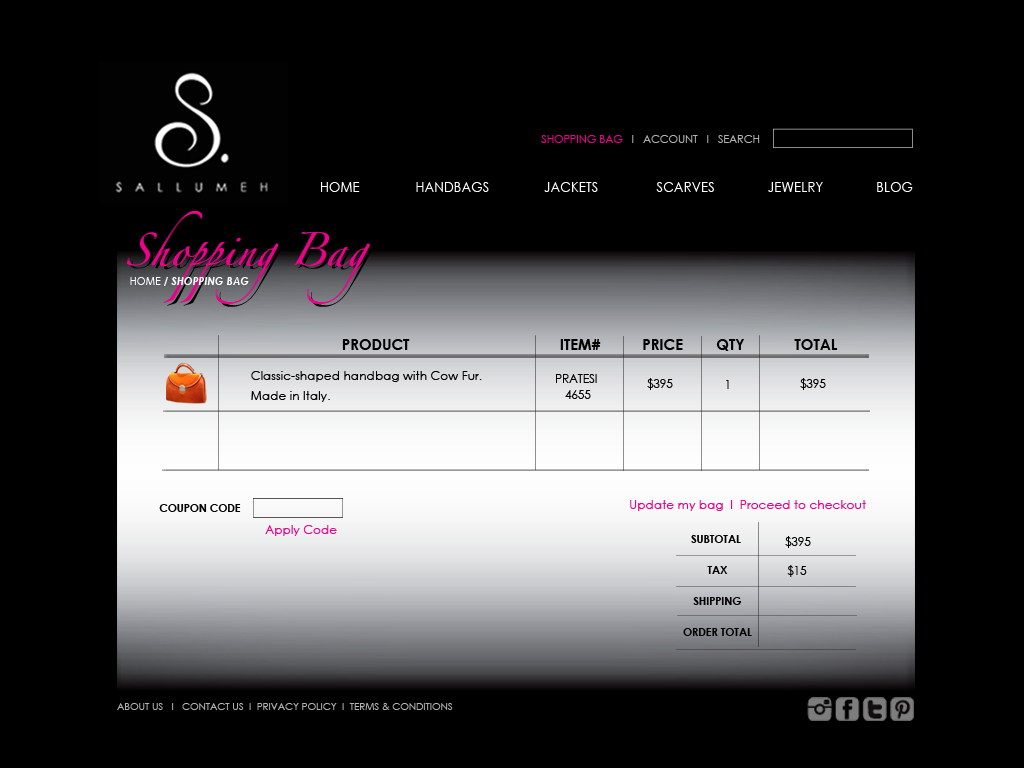
<style>
.page{position:relative;width:1024px;height:768px;background:#000000}
.page>*{position:absolute;margin:0}
.t1{font:10.9px "CenturyGothic";color:#b2b1b1}
.t2{font:10.9px "CenturyGothic";color:#ec008c}
.t3{font:14.2px "CenturyGothic";letter-spacing:0.025em;color:#ffffff;scale:0.9 1}
.t4{font:29.5px "Zapfino";letter-spacing:0.025em;color:#ec008c}
.t5{font:11.2px "CenturyGothic-BoldItalic";letter-spacing:0.025em;color:#ffffff;scale:0.9 1}
.t6{font:11.2px "CenturyGothic";letter-spacing:0.025em;color:#ffffff;scale:0.9 1}
.t7{font:15.1px "CenturyGothic-Bold";color:#000000}
.t8{font:12.3px/19.6px "CenturyGothic";color:#000000}
.t9{font:11.8px/15.7px "CenturyGothic";color:#000000}
.t10{font:11.8px "CenturyGothic";color:#000000}
.t11{font:10.9px "CenturyGothic-Bold";color:#000000}
.t12{font:12.3px "CenturyGothic";color:#ec008c}
.t13{font:10.9px/15.4px "CenturyGothic-Bold";color:#000000}
.t14{font:10px "CenturyGothic";color:#b2b1b1}
</style>
<div class="page">
<p class="t1" style="left:541px;top:135px;width:219px;height:8px"><span class="t2">SHOPPING BAG</span>   I   ACCOUNT   I   SEARCH</p>
<p class="t3" style="left:321px;top:182px;width:39px;height:10px">HOME</p>
<p class="t3" style="left:416px;top:182px;width:73px;height:10px">HANDBAGS</p>
<p class="t3" style="left:544px;top:182px;width:54px;height:10px">JACKETS</p>
<p class="t3" style="left:656px;top:182px;width:58px;height:10px">SCARVES</p>
<p class="t3" style="left:768px;top:182px;width:55px;height:10px">JEWELRY</p>
<p class="t3" style="left:877px;top:182px;width:36px;height:10px">BLOG</p>
<p class="t4" style="left:126px;top:210px;width:243px;height:94px;text-align:center">Shopping Bag</p>
<p class="t4" style="left:127px;top:210px;width:243px;height:94px;text-align:center">Shopping Bag</p>
<p class="t5" style="left:130px;top:277px;width:119px;height:9px"><span class="t6">HOME / </span>SHOPPING BAG</p>
<p class="t7" style="left:342px;top:339px;width:496px;height:12px">PRODUCT                                    ITEM#          PRICE        QTY            TOTAL</p>
<p class="t8" style="left:251px;top:371px;width:231px;height:31px">Classic-shaped handbag with Cow Fur. <br>Made in Italy.</p>
<p class="t9" style="left:556px;top:374px;width:41px;height:25px;text-align:center">PRATESI <br>4655</p>
<p class="t10" style="left:647px;top:378px;width:26px;height:12px">$395</p>
<p class="t10" style="left:726px;top:380px;width:3px;height:9px">1</p>
<p class="t10" style="left:800px;top:378px;width:26px;height:12px">$395</p>
<p class="t11" style="left:159px;top:504px;width:82px;height:8px">COUPON CODE</p>
<p class="t12" style="left:630px;top:500px;width:236px;height:11px">Update my bag  I  Proceed to checkout</p>
<p class="t12" style="left:265px;top:525px;width:72px;height:11px">Apply Code</p>
<p class="t13" style="left:683px;top:535px;width:69px;height:101px;text-align:center">SUBTOTAL <br><br>TAX<br><br>SHIPPING<br><br>ORDER TOTAL</p>
<p class="t10" style="left:785px;top:536px;width:26px;height:12px">$395</p>
<p class="t10" style="left:787px;top:565px;width:20px;height:12px">$15</p>
<p class="t14" style="left:117px;top:703px;width:336px;height:7px">ABOUT US   I   CONTACT US  I  PRIVACY POLICY  I  TERMS &amp; CONDITIONS</p>
</div>
